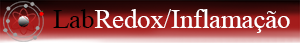
<style>
.page{position:relative;width:300px;height:43px}
.page>*{position:absolute;margin:0}
.t1{font:26.6px "TimesNewRomanPSMT";color:#ffffff}
.t2{font:26.6px "TimesNewRomanPSMT";color:#000000}
</style>
<div class="page">
<p class="t1" style="left:53px;top:9px;width:237px;height:24px"><span class="t2">Lab</span>Redox/Inflamação</p>
</div>
